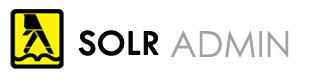
<style>
.page{position:relative;width:326px;height:82px;background:#ffffff}
.page>*{position:absolute;margin:0}
.t1{font:36.5px "TwCenMT-Regular";color:#000000;font-weight:bold}
.t2{font:36px "CenturyGothic";color:#a2a2a1}
</style>
<div class="page">
<p class="t1" style="left:78px;top:30px;width:81px;height:26px">SOLR</p>
<p class="t2" style="left:170px;top:31px;width:119px;height:26px">ADMIN</p>
</div>
